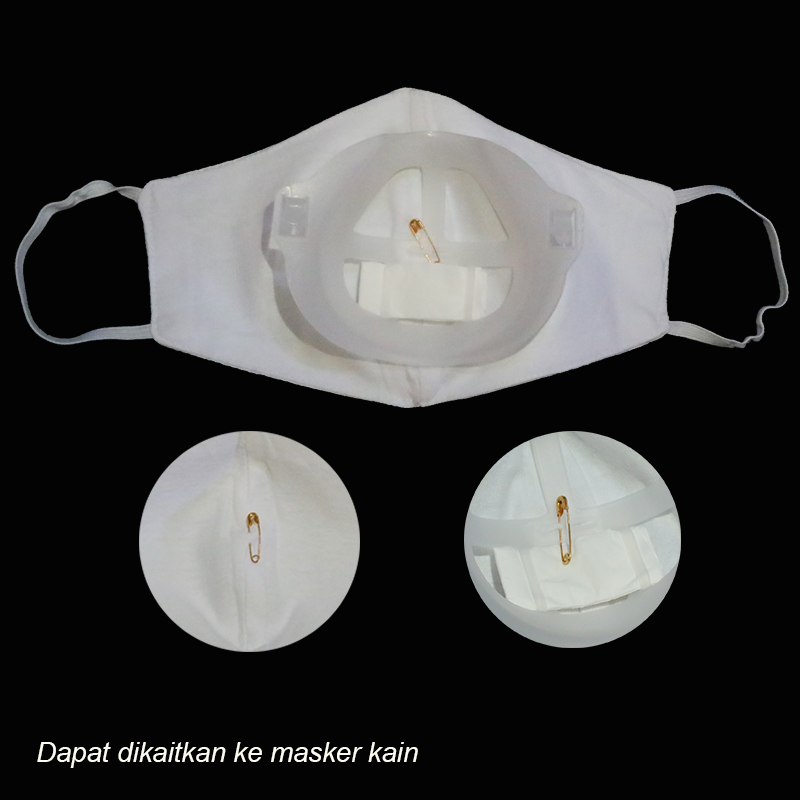
<style>
.page{position:relative;width:800px;height:800px;background:#030303}
.page>*{position:absolute;margin:0}
.t1{font:27.5px "Arial-ItalicMT";color:#fbfbf0}
</style>
<div class="page">
<p class="t1" style="left:37px;top:742px;width:381px;height:26px">Dapat dikaitkan ke masker kain</p>
</div>
